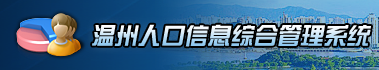
<style>
.page{position:relative;width:379px;height:70px}
.page>*{position:absolute;margin:0}
.t1{font:23.2px "FZZYJW--GB1-0";font-style:italic}
</style>
<div class="page">
<p class="t1" style="left:92px;top:24px;width:279px;height:23px">温州人口信息综合管理系统</p>
</div>
